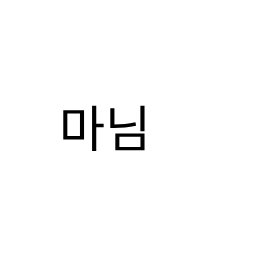
<style>
.page{position:relative;width:256px;height:256px;background:#ffffff}
.page>*{position:absolute;margin:0}
.t1{font:50px "NotoSansKR-Regular";color:#000000}
</style>
<div class="page">
<p class="t1" style="left:63px;top:105px;width:82px;height:46px">마님</p>
</div>
